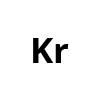
<style>
.page{position:relative;width:100px;height:100px;background:#ffffff}
.page>*{position:absolute;margin:0}
.t1{font:35px "OpenSans-Bold";color:#000000}
</style>
<div class="page">
<p class="t1" style="left:33px;top:38px;width:36px;height:25px">Kr</p>
</div>
